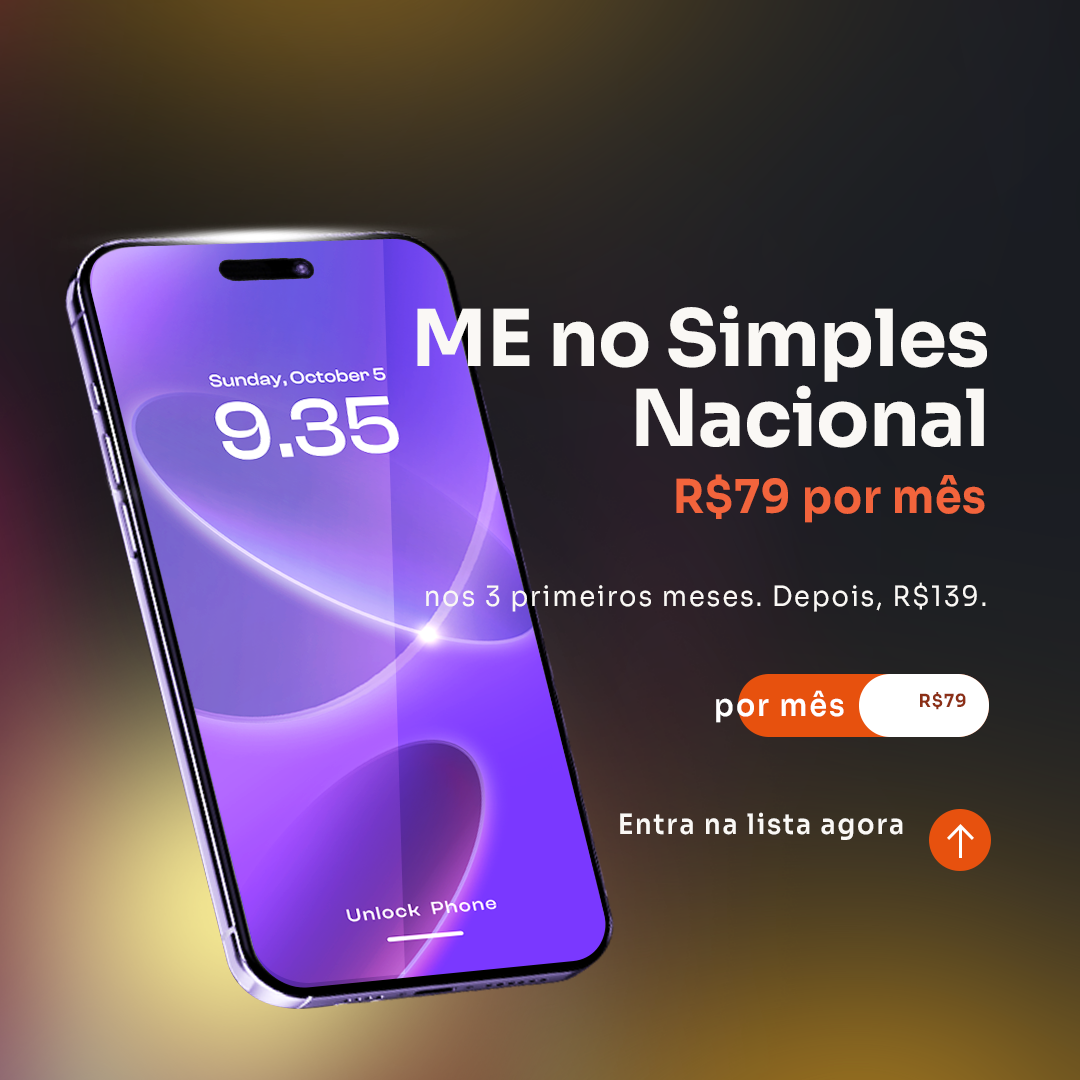
<style>
.page{position:relative;width:1080px;height:1080px}
.page>*{position:absolute;margin:0}
.t1{font:78.3px/80.1px "Sora-Bold";letter-spacing:-0.01em;color:#faf8f5}
.t2{font:46.4px "Sora-Bold";letter-spacing:0.025em;color:#f2643c;scale:0.92 1}
.t3{font:28px "Sora-Regular";letter-spacing:0.075em;color:#faf8f5;scale:0.92 1}
.t4{font:30.9px "Sora-SemiBold";letter-spacing:0.075em;color:#ffffff;scale:0.92 1}
.t5{font:30.9px "Sora-Bold";letter-spacing:0.075em;color:#8c2f16;scale:0.92 1}
.t6{font:28px "Sora-SemiBold";letter-spacing:0.075em;color:#faf8f5;scale:0.92 1}
</style>
<div class="page">
<p class="t1" style="left:417px;top:305px;width:570px;height:143px;text-align:right">ME no Simples<br>Nacional</p>
<p class="t2" style="left:676px;top:474px;width:309px;height:49px">R$79 por mês</p>
<p class="t3" style="left:426px;top:582px;width:560px;height:30px">nos 3 primeiros meses. Depois, R$139.</p>
<p class="t4" style="left:716px;top:690px;width:128px;height:33px">por mês</p>
<p class="t5" style="left:920px;top:692px;width:46px;height:18px">R$79</p>
<p class="t6" style="left:620px;top:812px;width:283px;height:28px">Entra na lista agora</p>
</div>
